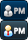
<style>
.page{position:relative;width:28px;height:40px}
.page>*{position:absolute;margin:0}
.t1{font:8px "Advantage-Demi";color:#c9c9c9;font-weight:bold}
.t2{font:8px "Advantage-Demi";color:#ffffff;font-weight:bold}
</style>
<div class="page">
<p class="t1" style="left:14px;top:7px;width:11px;height:7px">PM</p>
<p class="t2" style="left:14px;top:27px;width:11px;height:7px">PM</p>
</div>
